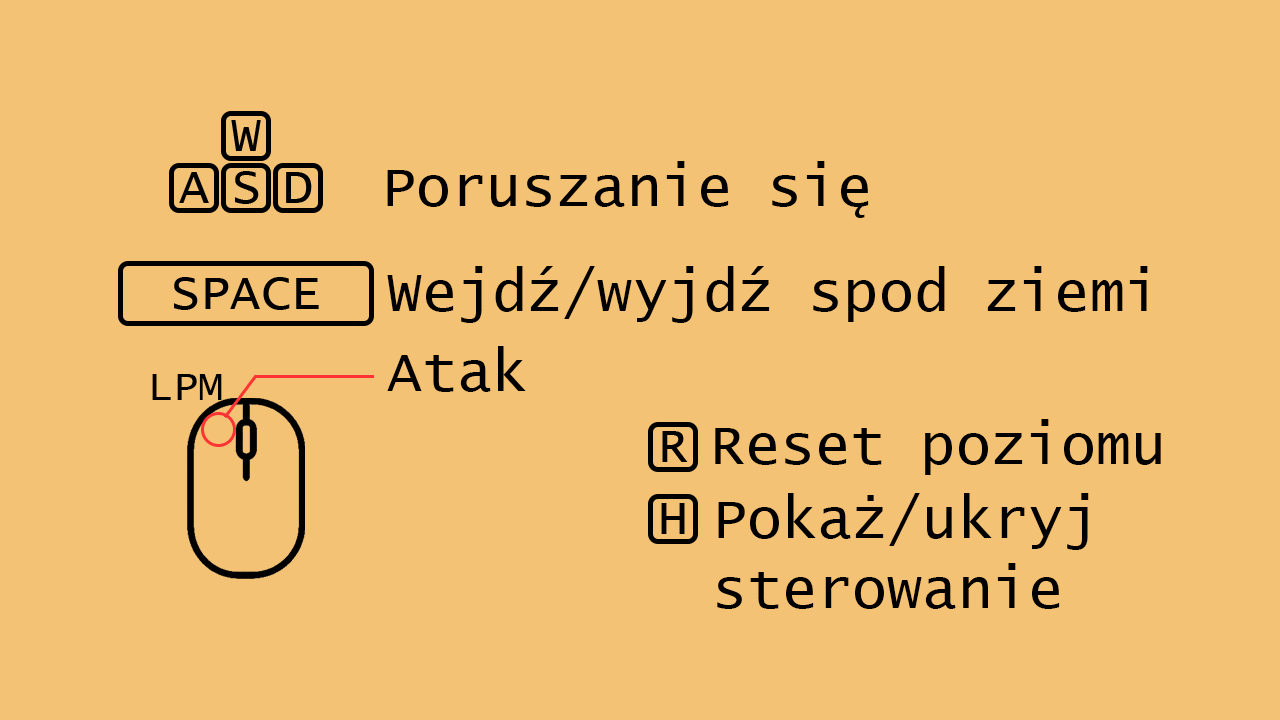
<style>
.page{position:relative;width:1280px;height:720px;background:#f4c274}
.page>*{position:absolute;margin:0}
.t1{font:58.3px "LucidaConsole";color:#000000}
.t2{font:41.7px "LucidaConsole";color:#000000}
</style>
<div class="page">
<p class="t1" style="left:387px;top:161px;width:482px;height:57px">Poruszanie się</p>
<p class="t1" style="left:387px;top:266px;width:761px;height:57px">Wejdź/wyjdź spod ziemi</p>
<p class="t1" style="left:387px;top:346px;width:139px;height:46px">Atak</p>
<p class="t2" style="left:152px;top:374px;width:70px;height:26px">LPM</p>
<p class="t1" style="left:715px;top:419px;width:446px;height:56px">Reset poziomu</p>
<p class="t1" style="left:717px;top:493px;width:372px;height:116px">Pokaż/ukryj<br>sterowanie</p>
</div>
